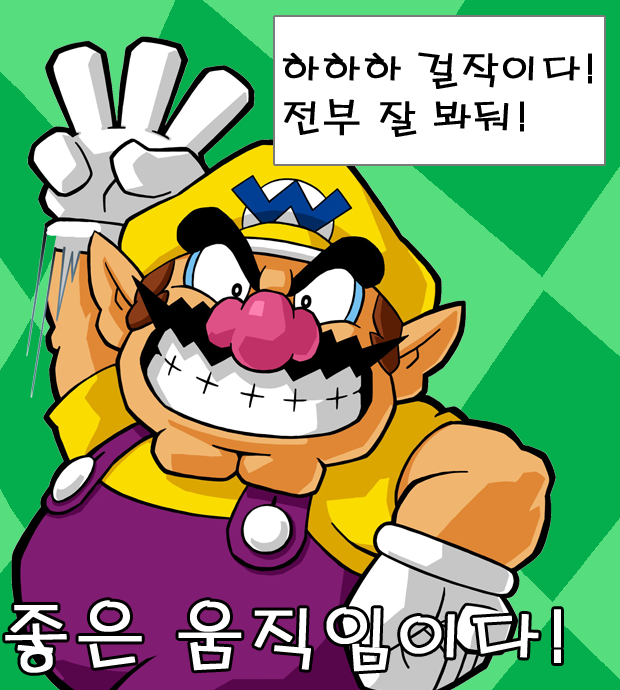
<style>
.page{position:relative;width:620px;height:690px}
.page>*{position:absolute;margin:0}
.t1{font:40.1px "H2porL";color:#000000;font-weight:bold}
.t2{font:72px "H2porL";color:#ffffff;font-weight:bold}
</style>
<div class="page">
<p class="t1" style="left:282px;top:52px;width:310px;height:85px">하하하 걸작이다!<br>전부 잘 봐둬!</p>
<p class="t2" style="left:5px;top:600px;width:556px;height:73px">좋은 움직임이다!</p>
</div>
